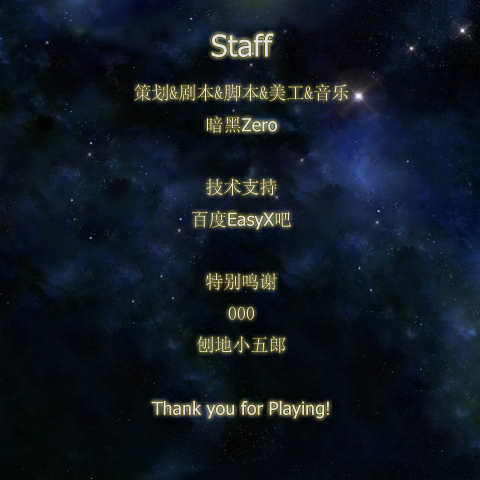
<style>
.page{position:relative;width:480px;height:480px}
.page>*{position:absolute;margin:0}
.t1{font:18px "Tahoma";color:#e4e1e1}
.t2{font:24px "Tahoma";color:#e4e1e1}
.t3{font:30px "Tahoma";color:#e4e1e1}
.t4{font:18px "SimSun";color:#e4e1e1}
</style>
<div class="page">
<p class="t1" style="left:134px;top:33px;width:214px;height:386px"><span class="t2"><br></span><span class="t3">Staff<br></span><span class="t4">策划&amp;剧本&amp;脚本&amp;美工&amp;音乐<br>暗黑</span>Zero<br><br><span class="t4">技术支持<br>百度</span>EasyX<span class="t4">吧<br><br>特别鸣谢<br>000<br>刨地小五郎<br><br></span>Thank you for Playing!</p>
</div>
